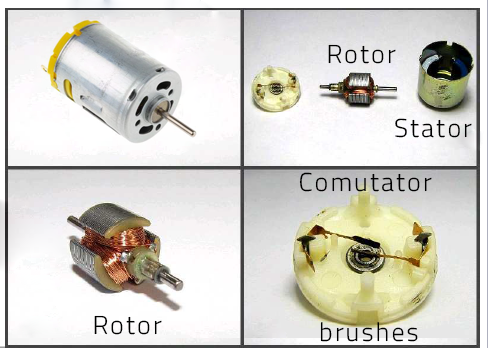
<style>
.page{position:relative;width:488px;height:348px}
.page>*{position:absolute;margin:0}
.t1{font:26px "TitilliumWeb-Light";letter-spacing:0.08em;color:#000000}
.t2{font:26px/25px "TitilliumWeb-Light";letter-spacing:0.08em;color:#000000}
</style>
<div class="page">
<p class="t1" style="left:328px;top:44px;width:68px;height:20px">Rotor</p>
<p class="t1" style="left:395px;top:118px;width:77px;height:20px">Stator</p>
<p class="t2" style="left:299px;top:172px;width:133px;height:170px;text-align:center">Comutator <br><br><br><br><br><br>brushes</p>
<p class="t1" style="left:94px;top:315px;width:68px;height:20px">Rotor</p>
</div>
